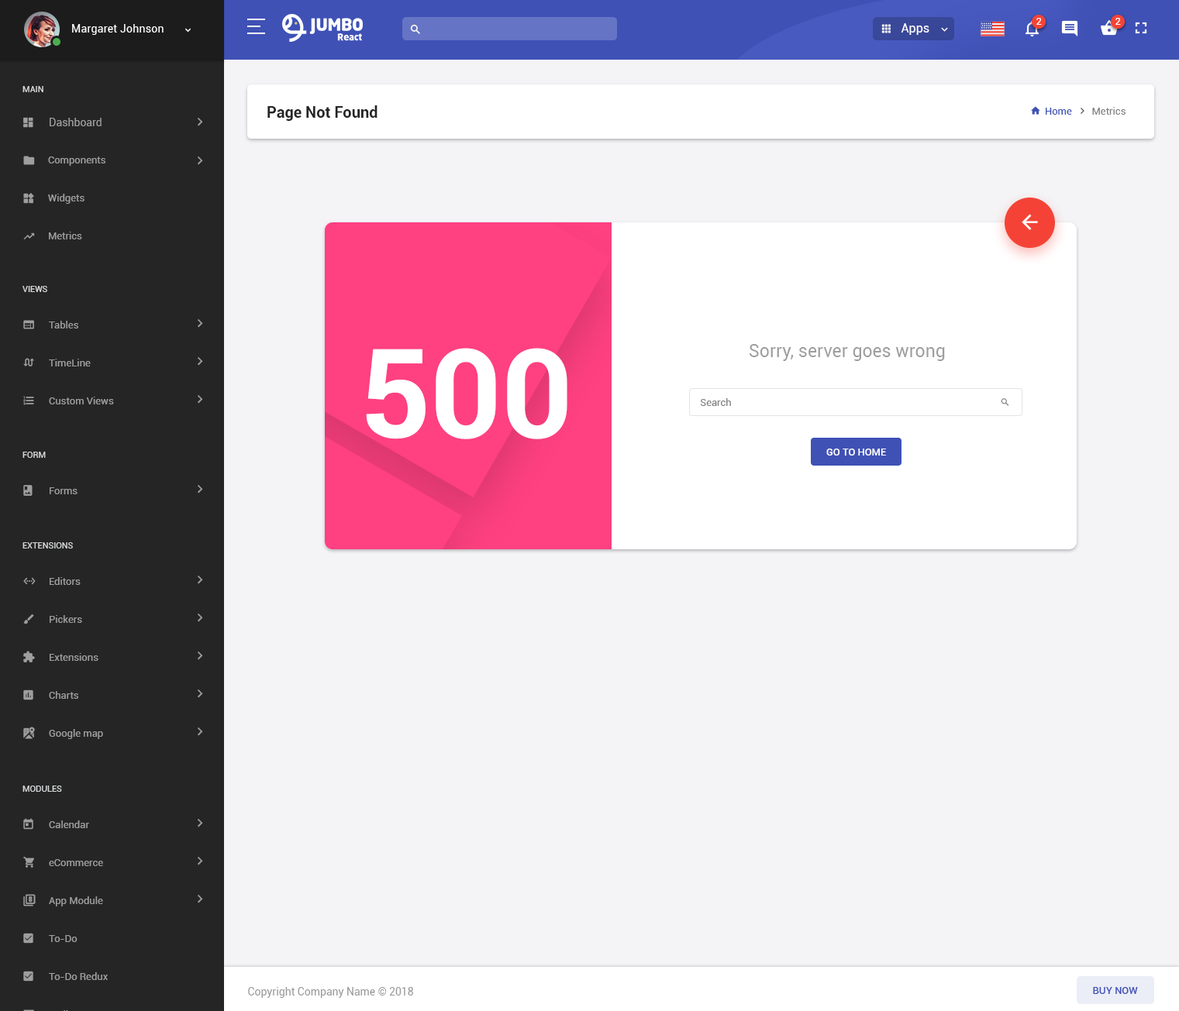
<style>
.page{position:relative;width:1179px;height:1011px;background:#f4f4f7}
.page>*{position:absolute;margin:0}
.t1{font:10.1px "Roboto-Regular";color:#ffffff}
.t2{font:10.9px "Roboto-Regular";letter-spacing:0.02em;color:#fafafa}
.t3{font:12.4px "Roboto-Regular";color:#ffffff}
.t4{font:8.5px "Roboto-Regular";color:#d6d8d9;text-transform:uppercase}
.t5{font:15.5px "Roboto-Bold";color:#252525}
.t6{font:10.1px "Roboto-Regular";color:#808080}
.t7{font:10.1px "Roboto-Regular";color:#3f51b5}
.t8{font:10.9px "Roboto-Regular";color:#9e9e9e}
.t9{font:10.1px/38px "Roboto-Regular";color:#9e9e9e}
.t10{font:124px "Roboto-Bold";color:#ffffff}
.t11{font:17.8px "Roboto-Regular";color:#9e9e9e}
.t12{font:10.1px "Roboto-Medium";color:#ffffff;text-transform:uppercase}
.t13{font:10.1px "Roboto-Regular";color:#9e9e9e}
.t14{font:10.9px "Roboto-Regular";color:#999999}
.t15{font:10.1px "Roboto-Medium";color:#3f51b5;text-transform:uppercase}
</style>
<div class="page">
<p class="t1" style="left:1036px;top:18px;width:6px;height:7px">2</p>
<p class="t1" style="left:1115px;top:18px;width:6px;height:7px">2</p>
<p class="t2" style="left:72px;top:24px;width:92px;height:11px">Margaret Johnson</p>
<p class="t3" style="left:901px;top:23px;width:28px;height:12px">Apps</p>
<p class="t4" style="left:22px;top:86px;width:21px;height:6px">main</p>
<p class="t5" style="left:267px;top:105px;width:110px;height:16px">Page Not Found</p>
<p class="t6" style="left:1046px;top:107px;width:79px;height:8px"><span class="t7">Home       </span> Metrics</p>
<p class="t8" style="left:50px;top:118px;width:52px;height:8px">Dashboard</p>
<p class="t9" style="left:48px;top:157px;width:57px;height:83px">Components<br>Widgets<br>Metrics</p>
<p class="t4" style="left:22px;top:286px;width:25px;height:6px">Views</p>
<p class="t9" style="left:49px;top:321px;width:65px;height:84px">Tables<br>TimeLine<br>Custom Views</p>
<p class="t10" style="left:366px;top:348px;width:201px;height:91px">500</p>
<p class="t11" style="left:750px;top:344px;width:195px;height:17px">Sorry, server goes wrong</p>
<p class="t6" style="left:700px;top:398px;width:31px;height:8px">Search</p>
<p class="t12" style="left:826px;top:449px;width:60px;height:7px">Go to home</p>
<p class="t4" style="left:22px;top:452px;width:24px;height:6px">FORM</p>
<p class="t13" style="left:50px;top:488px;width:28px;height:7px">Forms</p>
<p class="t4" style="left:22px;top:543px;width:51px;height:6px">Extensions</p>
<p class="t9" style="left:49px;top:577px;width:54px;height:162px">Editors<br>Pickers<br>Extensions<br>Charts<br>Google map</p>
<p class="t4" style="left:22px;top:786px;width:40px;height:6px">Modules</p>
<p class="t14" style="left:248px;top:987px;width:165px;height:11px">Copyright Company Name © 2018</p>
<p class="t15" style="left:1093px;top:987px;width:45px;height:7px">Buy Now</p>
</div>
